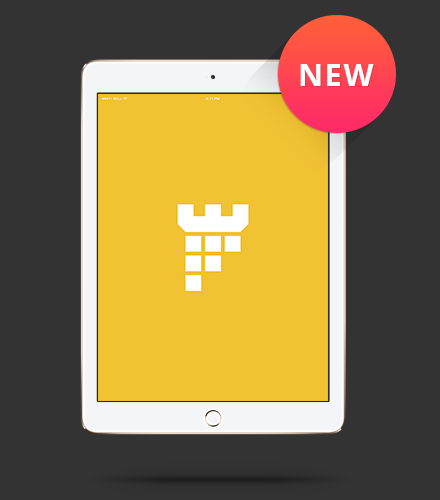
<style>
.page{position:relative;width:440px;height:500px;background:#333333}
.page>*{position:absolute;margin:0}
.t1{font:31px "OpenSans-Bold";letter-spacing:0.05em;color:#ffffff;text-transform:uppercase}
</style>
<div class="page">
<p class="t1" style="left:300px;top:64px;width:74px;height:22px">NEW</p>
</div>
